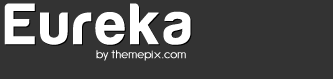
<style>
.page{position:relative;width:333px;height:79px;background:#333333}
.page>*{position:absolute;margin:0}
.t1{font:60px "Harabara";letter-spacing:0.05em;color:#ffffff;font-weight:bold}
.t2{font:12px "Antipasto-ExtraLight";letter-spacing:0.05em;color:#ffffff;font-weight:bold}
</style>
<div class="page">
<p class="t1" style="left:4px;top:3px;width:187px;height:42px">Eureka</p>
<p class="t2" style="left:96px;top:50px;width:90px;height:11px">by themepix.com</p>
</div>
